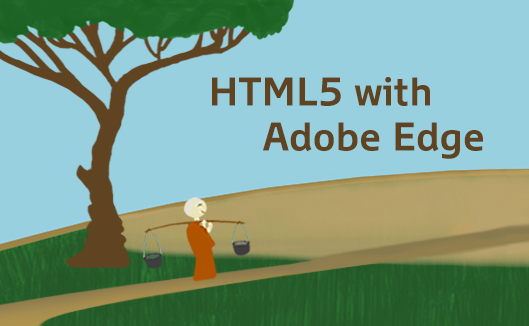
<style>
.page{position:relative;width:529px;height:326px;background:#98d0e0}
.page>*{position:absolute;margin:0}
.t1{font:37.5px "WascoSans-Bold";color:#604320}
</style>
<div class="page">
<p class="t1" style="left:212px;top:77px;width:271px;height:82px">HTML5 with<br>     Adobe Edge</p>
</div>
